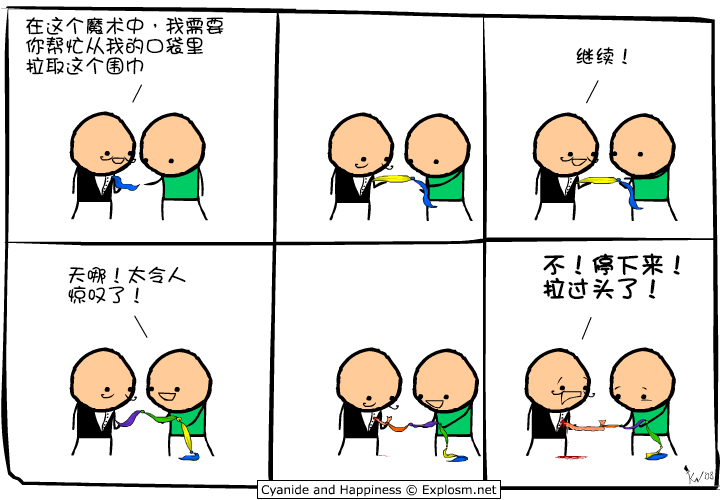
<style>
.page{position:relative;width:720px;height:500px;background:#ffffff}
.page>*{position:absolute;margin:0}
.t1{font:20px/20px "DFGirl";color:#000000}
.t2{font:20px "DFGirl";color:#000000}
.t3{font:24px/24px "DFGirl";color:#000000;font-weight:bold}
</style>
<div class="page">
<p class="t1" style="left:25px;top:16px;width:199px;height:59px">在这个魔术中，我需要<br>你帮忙从我的口袋里<br>拉取这个围巾</p>
<p class="t2" style="left:576px;top:46px;width:51px;height:19px">继续！</p>
<p class="t3" style="left:543px;top:253px;width:137px;height:46px">不！停下来！<br>拉过头了！</p>
<p class="t1" style="left:68px;top:266px;width:118px;height:38px">天哪！太令人<br>惊叹了！</p>
</div>
